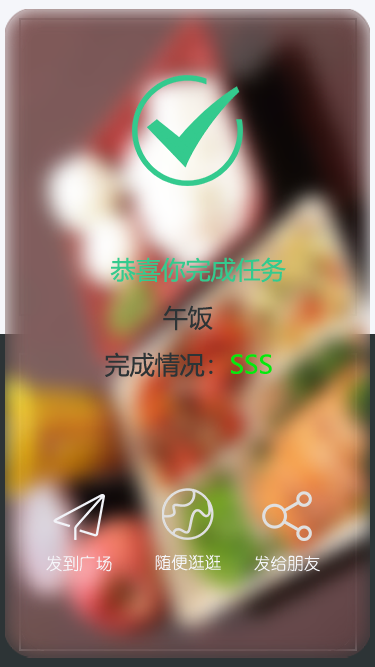
<style>
.page{position:relative;width:375px;height:667px}
.page>*{position:absolute;margin:0}
.t1{font:25px "MicrosoftYaHei";color:#34ca8e}
.t2{font:25px "MicrosoftYaHei";color:#2d3436}
.t3{font:25px "MicrosoftYaHei";color:#03e90e}
</style>
<div class="page">
<p class="t1" style="left:110px;top:257px;width:176px;height:26px">恭喜你完成任务</p>
<p class="t2" style="left:163px;top:305px;width:50px;height:26px">午饭</p>
<p class="t2" style="left:105px;top:352px;width:167px;height:26px">完成情况：<span class="t3">SSS</span></p>
</div>
